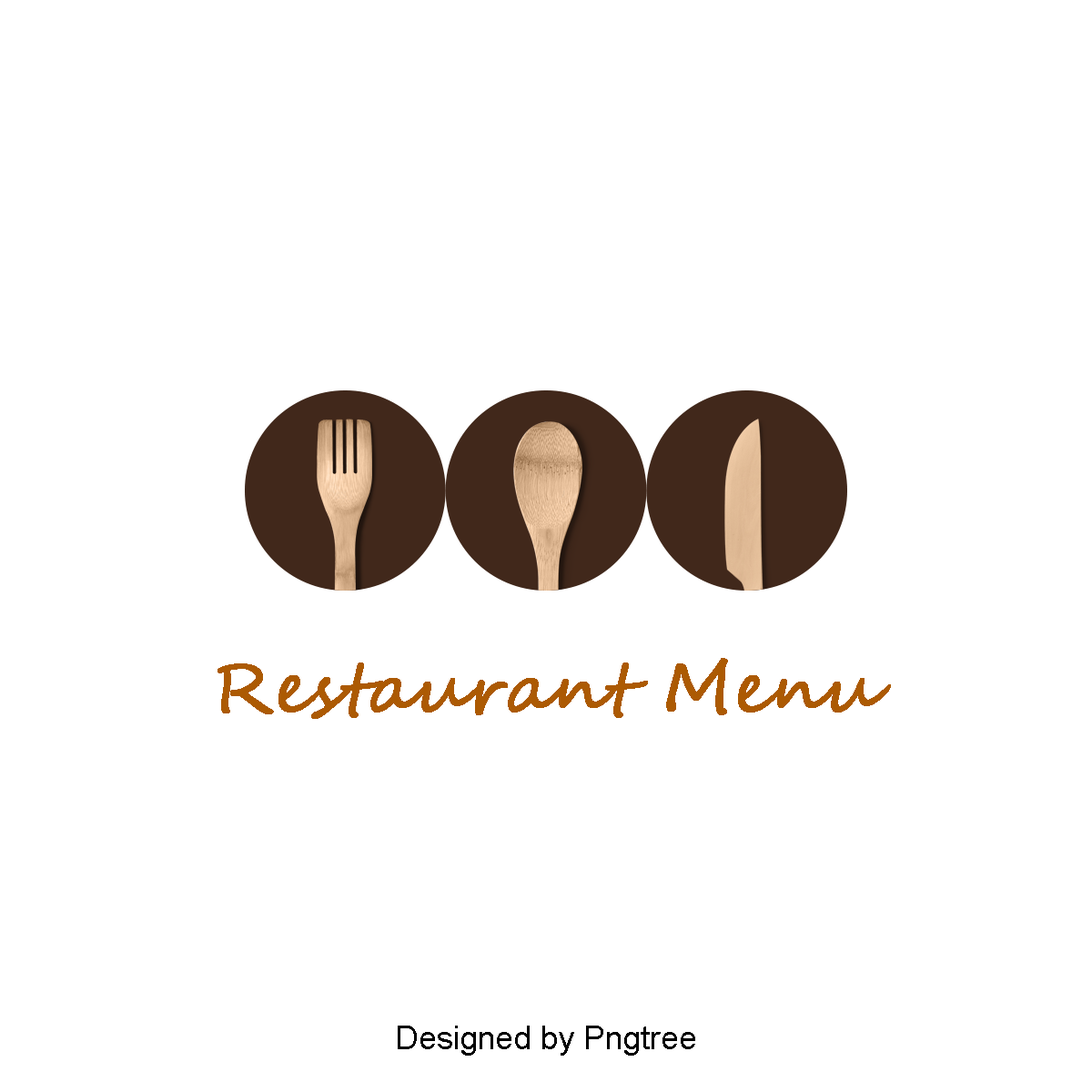
<style>
.page{position:relative;width:1092px;height:1092px;background:#ffffff}
.page>*{position:absolute;margin:0}
.t1{font:68.2px "SegoeScript";color:#ac5a03;font-weight:bold}
.t2{font:32.8px "ArialMT";color:#000000}
</style>
<div class="page">
<p class="t1" style="left:217px;top:658px;width:674px;height:61px">Restaurant Menu</p>
<p class="t2" style="left:398px;top:1026px;width:297px;height:30px">Designed by Pngtree</p>
</div>
